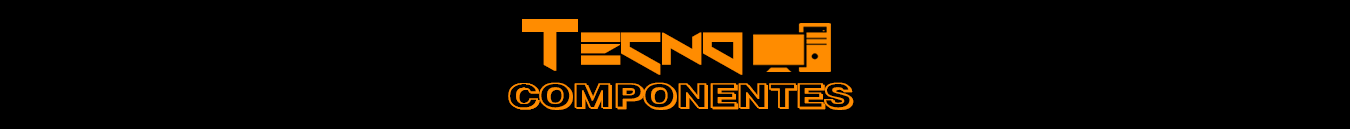
<style>
.page{position:relative;width:1350px;height:129px;background:#000000}
.page>*{position:absolute;margin:0}
.t1{font:65.3px "Xero's-Theorem";letter-spacing:-0.02em;color:#ff8c00;font-variant:small-caps;font-weight:bold;scale:0.89 1}
.t2{font:47.4px "PragmaticaShadowC-Bold";letter-spacing:-0.02em;color:#ff8c00;font-variant:small-caps;font-weight:bold;scale:1.27 1}
</style>
<div class="page">
<p class="t1" style="left:522px;top:19px;width:221px;height:56px">Tecno</p>
<p class="t2" style="left:508px;top:82px;width:346px;height:28px">componentes</p>
</div>
